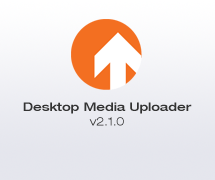
<style>
.page{position:relative;width:215px;height:180px}
.page>*{position:absolute;margin:0}
.t1{font:12px "HelveticaNeue-MediumExt";color:#333333}
.t2{font:12px "HelveticaNeue-LightExt";color:#333333}
</style>
<div class="page">
<p class="t1" style="left:23px;top:102px;width:169px;height:24px;text-align:center">Desktop Media Uploader<br><span class="t2">v2.1.0</span></p>
</div>
